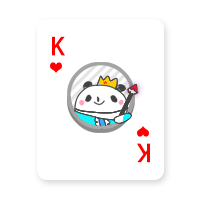
<style>
.page{position:relative;width:200px;height:200px;background:#ffffff}
.page>*{position:absolute;margin:0}
.t1{font:24px "AdobeHeitiStd-Regular";color:#ff0000}
</style>
<div class="page">
<p class="t1" style="left:52px;top:36px;width:13px;height:20px">K</p>
<p class="t1" style="left:137px;top:143px;width:13px;height:20px;rotate:180deg">K</p>
</div>
